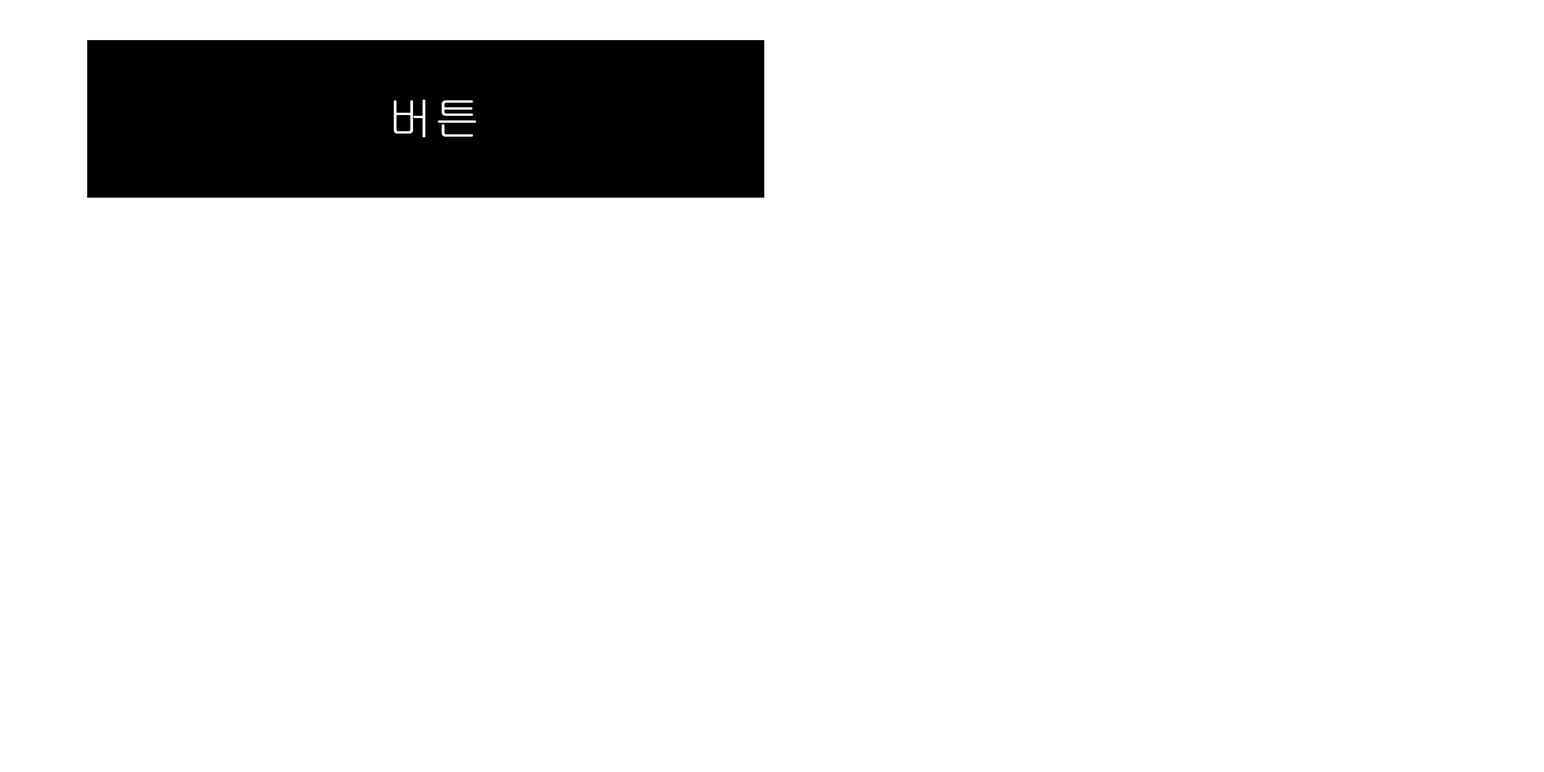
<style>
.page{position:relative;width:1544px;height:772px;background:#ffffff}
.page>*{position:absolute;margin:0}
.t1{font:46.3px "Gulim";color:#ffffff}
</style>
<div class="page">
<p class="t1" style="left:394px;top:100px;width:82px;height:37px">버튼</p>
</div>
